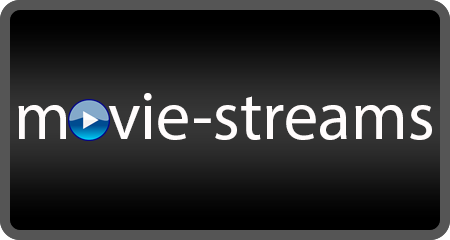
<style>
.page{position:relative;width:450px;height:240px}
.page>*{position:absolute;margin:0}
.t1{font:68px "MyriadPro-Regular";color:#fffcfc}
</style>
<div class="page">
<p class="t1" style="left:18px;top:93px;width:414px;height:47px">movie-streams</p>
</div>
